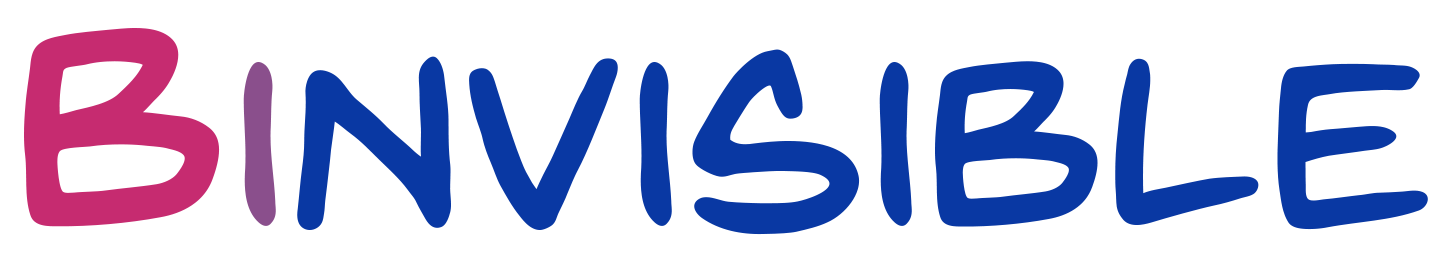
<style>
.page{position:relative;width:1452px;height:257px;background:#ffffff}
.page>*{position:absolute;margin:0}
.t1{font:250px "BackIssuesBB";color:#0938a3}
.t2{font:300px "BackIssuesBB";color:#c62b70}
.t3{font:250px "BackIssuesBB";color:#8a4f8c}
</style>
<div class="page">
<p class="t1" style="left:24px;top:28px;width:1404px;height:207px"><span class="t2">B</span><span class="t3">i</span>nvisible</p>
</div>
